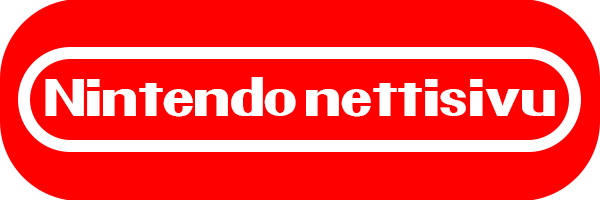
<style>
.page{position:relative;width:600px;height:200px;background:#ff0000}
.page>*{position:absolute;margin:0}
.t1{font:48px "Pretendo";color:#ffffff}
</style>
<div class="page">
<p class="t1" style="left:45px;top:77px;width:510px;height:40px">Nintendo nettisivu</p>
</div>
